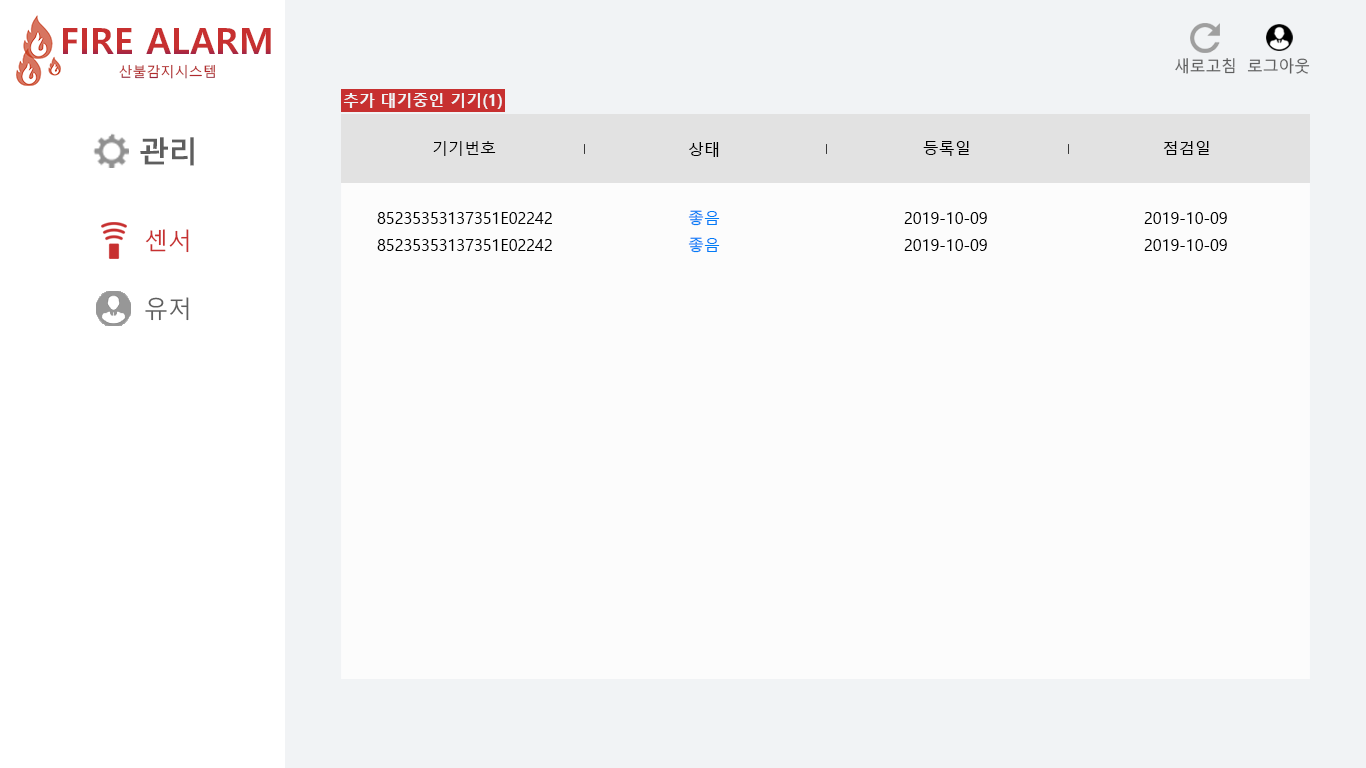
<style>
.page{position:relative;width:1366px;height:768px;background:#fcfcfc}
.page>*{position:absolute;margin:0}
.t1{font:36px "MalgunGothicBold";color:#c73030}
.t2{font:14px "MalgunGothic";color:#b32b2b}
.t3{font:16px "MalgunGothic";color:#5e5e5e}
.t4{font:16px "MalgunGothicBold";color:#f1f3f5}
.t5{font:30px "MalgunGothicBold";color:#5e5e5e}
.t6{font:16px "MalgunGothic";color:#000000}
.t7{font:16px "MalgunGothic";color:#027cf6}
.t8{font:24px "MalgunGothic";color:#c73030}
.t9{font:24px "MalgunGothic";color:#5e5e5e}
</style>
<div class="page">
<p class="t1" style="left:63px;top:28px;width:208px;height:26px">FIRE ALARM</p>
<p class="t2" style="left:119px;top:64px;width:96px;height:15px">산불감지시스템</p>
<p class="t3" style="left:1175px;top:58px;width:60px;height:16px">새로고침</p>
<p class="t3" style="left:1247px;top:58px;width:63px;height:16px">로그아웃</p>
<p class="t4" style="left:343px;top:93px;width:159px;height:16px">추가 대기중인 기기(1)</p>
<p class="t5" style="left:140px;top:137px;width:54px;height:29px">관리</p>
<p class="t6" style="left:433px;top:141px;width:63px;height:15px">기기번호</p>
<p class="t6" style="left:689px;top:142px;width:30px;height:15px">상태</p>
<p class="t6" style="left:923px;top:141px;width:46px;height:15px">등록일</p>
<p class="t6" style="left:1163px;top:141px;width:46px;height:14px">점검일</p>
<p class="t6" style="left:377px;top:212px;width:175px;height:12px">85235353137351E02242</p>
<p class="t7" style="left:688px;top:210px;width:32px;height:16px">좋음</p>
<p class="t6" style="left:904px;top:212px;width:83px;height:12px">2019-10-09</p>
<p class="t6" style="left:1144px;top:212px;width:83px;height:12px">2019-10-09</p>
<p class="t8" style="left:145px;top:229px;width:44px;height:24px">센서</p>
<p class="t6" style="left:377px;top:239px;width:175px;height:12px">85235353137351E02242</p>
<p class="t7" style="left:688px;top:237px;width:32px;height:16px">좋음</p>
<p class="t6" style="left:904px;top:239px;width:83px;height:12px">2019-10-09</p>
<p class="t6" style="left:1144px;top:239px;width:83px;height:12px">2019-10-09</p>
<p class="t9" style="left:145px;top:297px;width:44px;height:24px">유저</p>
</div>
